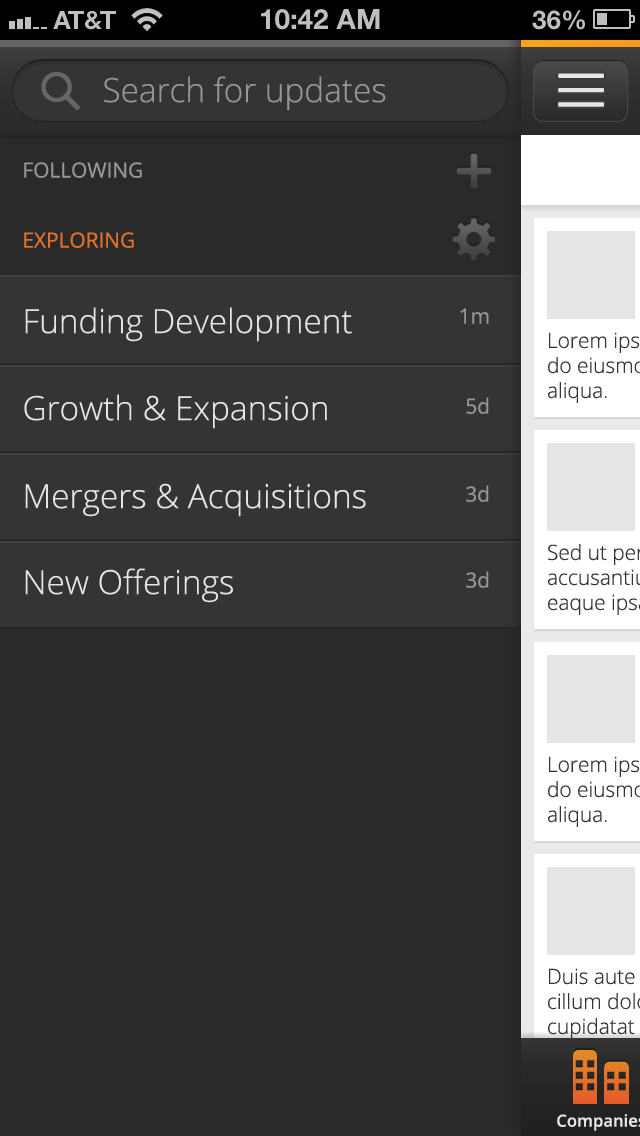
<style>
.page{position:relative;width:640px;height:1136px;background:#2a2a2a}
.page>*{position:absolute;margin:0}
.t1{font:33.3px "OpenSans-Light";color:#969696}
.t2{font:20.8px "OpenSans";color:#969696}
.t3{font:20.8px "OpenSans";color:#e57128}
.t4{font:33.3px "OpenSans-Light";color:#e5e5e5}
</style>
<div class="page">
<p class="t1" style="left:104px;top:76px;width:282px;height:35px">Search for updates</p>
<p class="t2" style="left:24px;top:162px;width:118px;height:16px">FOLLOWING</p>
<p class="t3" style="left:24px;top:232px;width:110px;height:16px">EXPLORING</p>
<p class="t4" style="left:25px;top:307px;width:327px;height:35px">Funding Development</p>
<p class="t2" style="left:460px;top:308px;width:29px;height:16px">1m</p>
<p class="t4" style="left:24px;top:394px;width:303px;height:35px">Growth &amp; Expansion</p>
<p class="t2" style="left:466px;top:397px;width:23px;height:17px">5d</p>
<p class="t4" style="left:25px;top:483px;width:341px;height:34px">Mergers &amp; Acquisitions</p>
<p class="t2" style="left:466px;top:485px;width:23px;height:17px">3d</p>
<p class="t4" style="left:25px;top:568px;width:208px;height:35px">New Offerings</p>
<p class="t2" style="left:466px;top:571px;width:23px;height:17px">3d</p>
</div>
